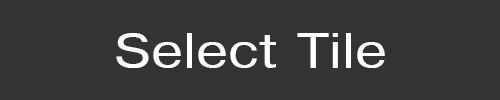
<style>
.page{position:relative;width:500px;height:100px;background:#333333}
.page>*{position:absolute;margin:0}
.t1{font:48px "Helvetica";color:#ffffff;scale:1.2 1}
</style>
<div class="page">
<p class="t1" style="left:116px;top:33px;width:269px;height:35px">Select Tile</p>
</div>
